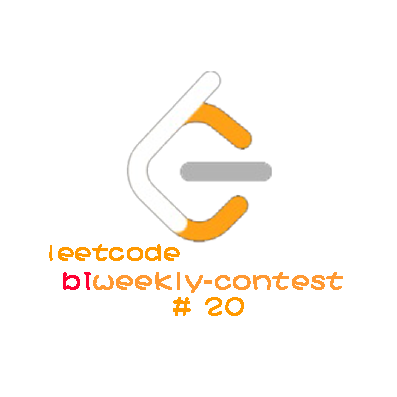
<style>
.page{position:relative;width:397px;height:397px;background:#ffffff}
.page>*{position:absolute;margin:0}
.t1{font:25px "DFPShaoNvW5";letter-spacing:0.02em;color:#ff9900;font-weight:bold}
.t2{font:26.7px "DFPShaoNvW5";letter-spacing:0.02em;color:#ff9933;font-weight:bold}
.t3{font:26.7px "DFPShaoNvW5";letter-spacing:0.02em;color:#ff0033;font-weight:bold}
.t4{font:26.7px "DFPShaoNvW5";letter-spacing:0.02em;color:#ff9900;font-weight:bold}
</style>
<div class="page">
<p class="t1" style="left:49px;top:244px;width:131px;height:17px">leetcode</p>
<p class="t2" style="left:63px;top:272px;width:280px;height:21px"><span class="t3">bi</span>weekly-contest</p>
<p class="t4" style="left:173px;top:297px;width:71px;height:19px"># 20</p>
</div>
